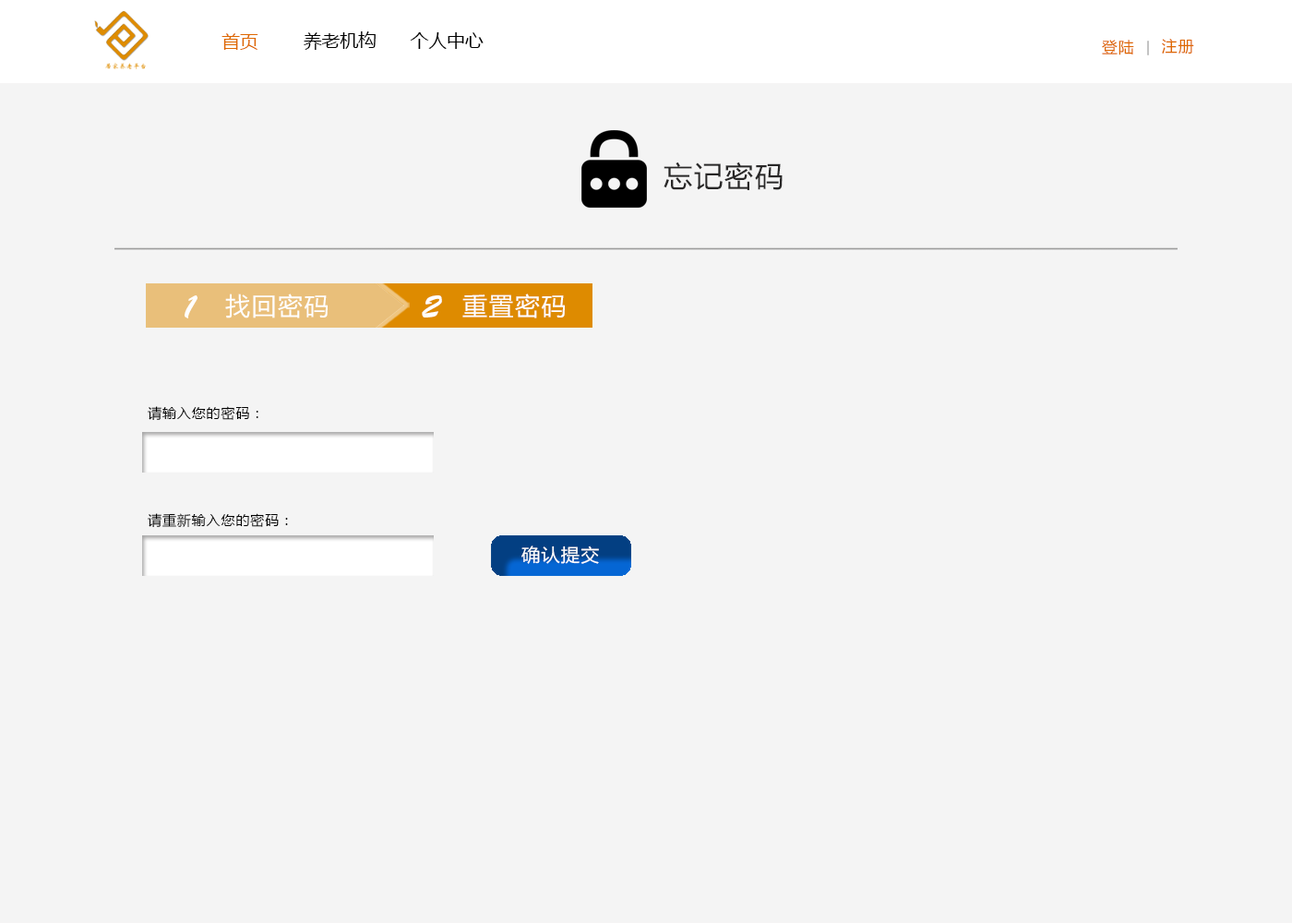
<style>
.page{position:relative;width:1292px;height:923px;background:#f4f4f4}
.page>*{position:absolute;margin:0}
.t1{font:18px "MicrosoftYaHei";color:#de6800}
.t2{font:18px "MicrosoftYaHei";color:#000000}
.t3{font:15.5px "MicrosoftYaHei";letter-spacing:0.06em;color:#de6800}
.t4{font:28.9px "MicrosoftYaHei";letter-spacing:0.06em;color:#282727}
.t5{font:24.9px "MicrosoftYaHei";letter-spacing:0.06em;color:#ffffff}
.t6{font:33.8px "BrushScriptStd";letter-spacing:0.06em;color:#ffffff}
.t7{font:13.8px "MicrosoftYaHei";letter-spacing:0.06em;color:#000000}
.t8{font:18px "MicrosoftYaHei";letter-spacing:0.06em;color:#ffffff;scale:1.03 1}
</style>
<div class="page">
<p class="t1" style="left:221px;top:33px;width:37px;height:17px">首页</p>
<p class="t2" style="left:304px;top:31px;width:72px;height:19px">养老机构</p>
<p class="t2" style="left:410px;top:32px;width:74px;height:17px">个人中心</p>
<p class="t3" style="left:1102px;top:40px;width:32px;height:15px">登陆</p>
<p class="t3" style="left:1162px;top:39px;width:32px;height:15px">注册</p>
<p class="t4" style="left:664px;top:162px;width:119px;height:28px">忘记密码</p>
<p class="t5" style="left:225px;top:293px;width:103px;height:25px">找回密码</p>
<p class="t5" style="left:462px;top:293px;width:103px;height:25px">重置密码</p>
<p class="t6" style="left:185px;top:295px;width:12px;height:23px">1</p>
<p class="t6" style="left:422px;top:295px;width:20px;height:22px">2</p>
<p class="t7" style="left:148px;top:406px;width:110px;height:14px">请输入您的密码：</p>
<p class="t7" style="left:148px;top:513px;width:140px;height:14px">请重新输入您的密码：</p>
<p class="t8" style="left:521px;top:545px;width:78px;height:19px">确认提交</p>
</div>
